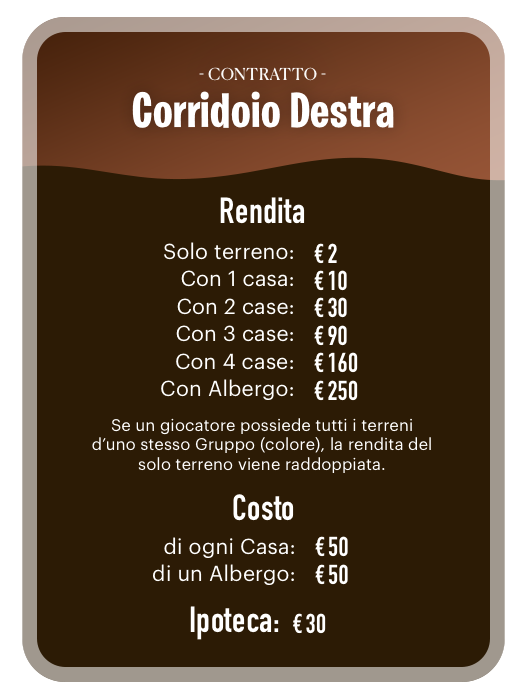
<style>
.page{position:relative;width:527px;height:700px;background:#2c1b05}
.page>*{position:absolute;margin:0}
.t1{font:16.5px "CanelaDeck-Regular";letter-spacing:0.01em;color:#ffffff;text-transform:uppercase}
.t2{font:49.3px "BurbankBigCondensed-Bold";letter-spacing:0.01em;color:#ffffff}
.t3{font:35.9px "DINCondensed-Bold";letter-spacing:0.01em;color:#ffffff}
.t4{font:21.3px "Graphik-Regular";letter-spacing:0.01em;color:#ffffff}
.t5{font:27px "DINCondensed-Bold";letter-spacing:0.01em;color:#ffffff}
.t6{font:16.5px "Graphik-Regular";letter-spacing:0.01em;color:#ffffff}
</style>
<div class="page">
<p class="t1" style="left:199px;top:67px;width:127px;height:14px;opacity:0.97">- contratto -</p>
<p class="t2" style="left:132px;top:91px;width:262px;height:37px">Corridoio Destra</p>
<p class="t3" style="left:220px;top:197px;width:85px;height:27px">Rendita</p>
<p class="t4" style="left:164px;top:242px;width:129px;height:18px">Solo terreno:</p>
<p class="t5" style="left:314px;top:243px;width:10px;height:21px">€</p>
<p class="t5" style="left:328px;top:243px;width:9px;height:20px">2</p>
<p class="t4" style="left:181px;top:270px;width:112px;height:17px">Con 1 casa:</p>
<p class="t5" style="left:314px;top:270px;width:10px;height:21px">€</p>
<p class="t5" style="left:328px;top:270px;width:19px;height:21px">10</p>
<p class="t4" style="left:177px;top:298px;width:116px;height:17px">Con 2 case:</p>
<p class="t5" style="left:314px;top:297px;width:10px;height:21px">€</p>
<p class="t5" style="left:328px;top:297px;width:19px;height:21px">30</p>
<p class="t4" style="left:176px;top:325px;width:117px;height:17px">Con 3 case:</p>
<p class="t5" style="left:314px;top:325px;width:10px;height:21px">€</p>
<p class="t5" style="left:328px;top:325px;width:19px;height:21px">90</p>
<p class="t4" style="left:176px;top:353px;width:117px;height:17px">Con 4 case:</p>
<p class="t5" style="left:314px;top:352px;width:10px;height:21px">€</p>
<p class="t5" style="left:328px;top:352px;width:30px;height:21px">160</p>
<p class="t4" style="left:161px;top:379px;width:132px;height:21px">Con Albergo:</p>
<p class="t5" style="left:314px;top:380px;width:10px;height:21px">€</p>
<p class="t5" style="left:328px;top:380px;width:30px;height:21px">250</p>
<p class="t6" style="left:92px;top:418px;width:339px;height:55px;text-align:center">Se un giocatore possiede tutti i terreni d’uno stesso Gruppo (colore), la rendita del solo terreno viene raddoppiata.</p>
<p class="t3" style="left:233px;top:494px;width:61px;height:27px">Costo</p>
<p class="t4" style="left:164px;top:537px;width:130px;height:21px">di ogni Casa:</p>
<p class="t5" style="left:315px;top:536px;width:10px;height:21px">€</p>
<p class="t5" style="left:328px;top:536px;width:20px;height:21px">50</p>
<p class="t4" style="left:153px;top:564px;width:141px;height:21px">di un Albergo:</p>
<p class="t5" style="left:315px;top:564px;width:10px;height:21px">€</p>
<p class="t5" style="left:328px;top:564px;width:20px;height:21px">50</p>
<p class="t3" style="left:190px;top:606px;width:89px;height:34px">Ipoteca:</p>
<p class="t5" style="left:293px;top:613px;width:9px;height:21px">€</p>
<p class="t5" style="left:306px;top:613px;width:20px;height:21px">30</p>
</div>
